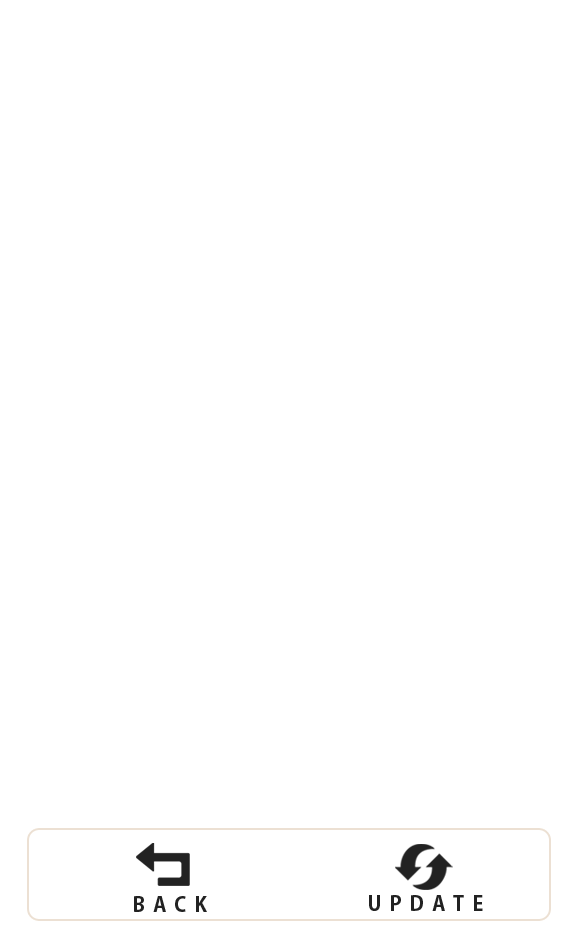
<style>
.page{position:relative;width:577px;height:933px;background:#ffffff}
.page>*{position:absolute;margin:0}
.t1{font:20px "AdobeGothicStd-Bold";letter-spacing:0.4em;color:#222222}
</style>
<div class="page">
<p class="t1" style="left:134px;top:896px;width:73px;height:16px">BACK</p>
<p class="t1" style="left:369px;top:895px;width:114px;height:16px">UPDATE</p>
</div>
